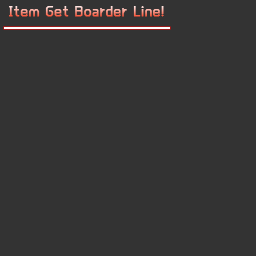
<style>
.page{position:relative;width:256px;height:256px;background:#333333}
.page>*{position:absolute;margin:0}
.t1{font:14.7px "MFShangHei_Noncommercial-Regular";letter-spacing:0.1em;font-weight:bold}
</style>
<div class="page">
<p class="t1" style="left:9px;top:6px;width:155px;height:11px">Item Get Boarder Line!</p>
</div>
